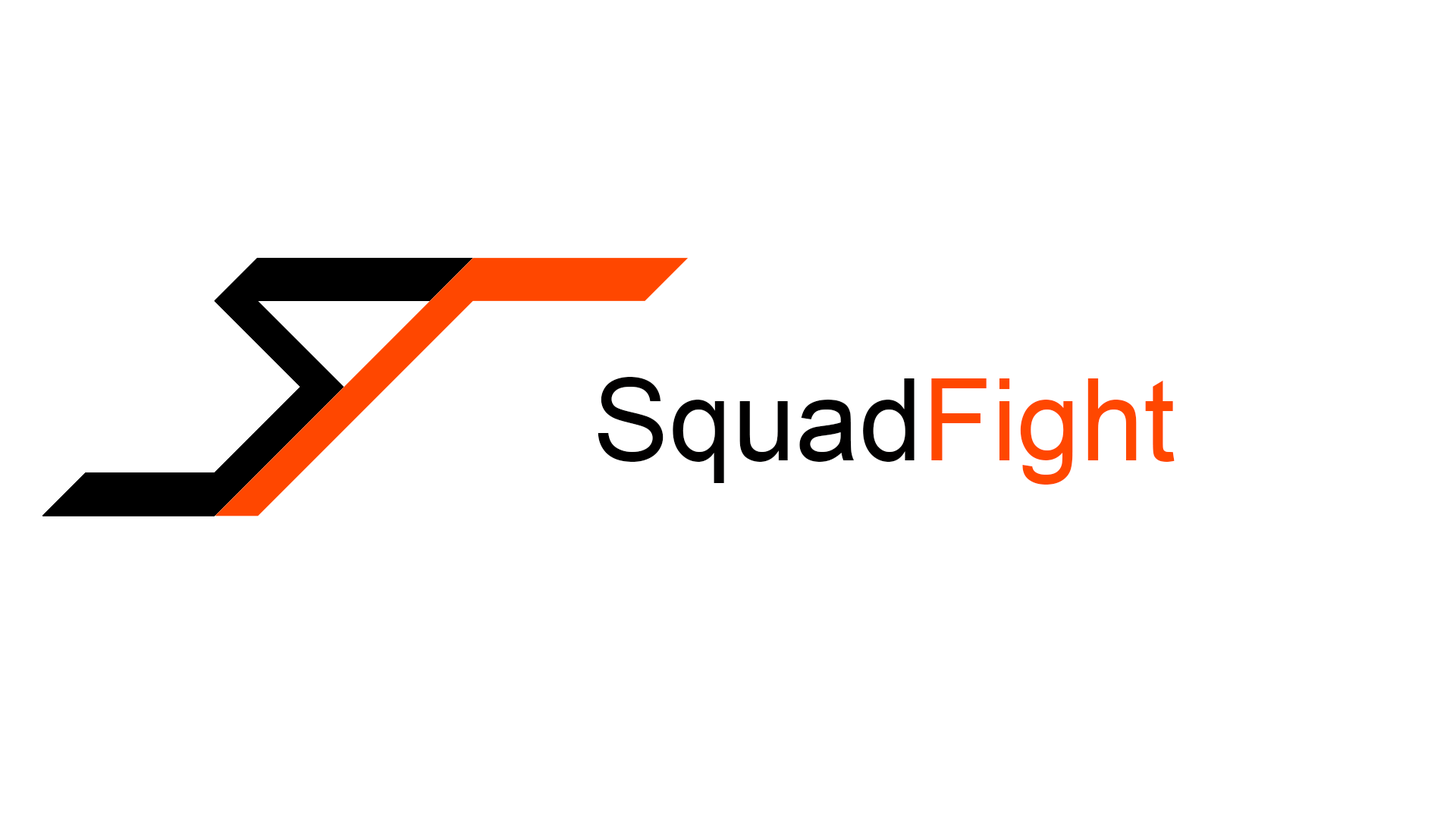
<style>
.page{position:relative;width:1456px;height:819px;background:#ffffff}
.page>*{position:absolute;margin:0}
.t1{font:113.7px "ArialMT";color:#010000}
.t2{font:113.7px "ArialMT";color:#ff4700}
</style>
<div class="page">
<p class="t1" style="left:598px;top:377px;width:577px;height:108px">Squad<span class="t2">Fight</span></p>
</div>
